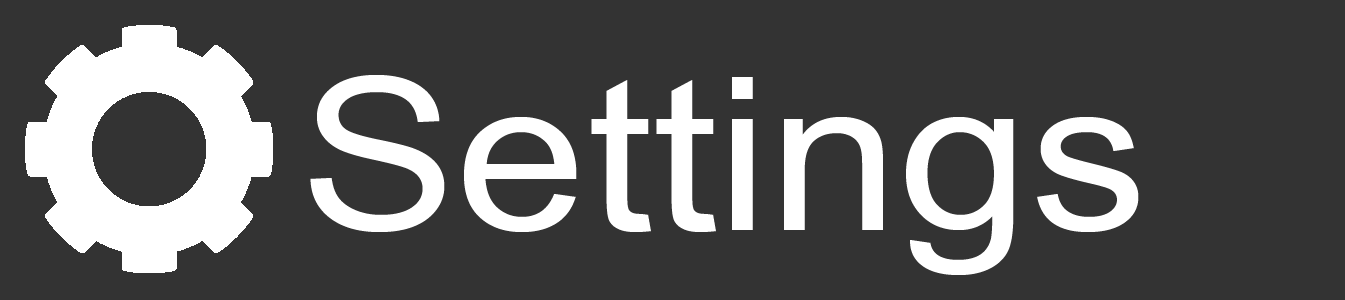
<style>
.page{position:relative;width:1345px;height:300px;background:#333333}
.page>*{position:absolute;margin:0}
.t1{font:214.4px "ArialNarrow";color:#ffffff;scale:1.33 1}
</style>
<div class="page">
<p class="t1" style="left:310px;top:75px;width:829px;height:200px">Settings</p>
</div>
